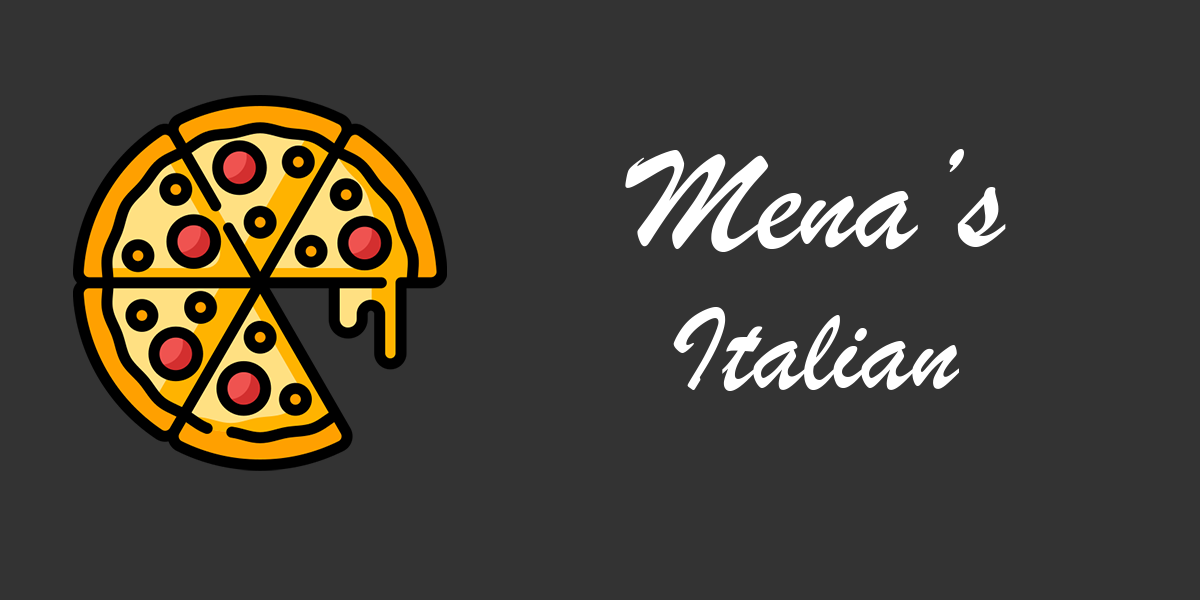
<style>
.page{position:relative;width:1200px;height:600px;background:#333333}
.page>*{position:absolute;margin:0}
.t1{font:150px "BrushScriptMT";color:#ffffff}
.t2{font:125px "BrushScriptMT";color:#ffffff}
</style>
<div class="page">
<p class="t1" style="left:625px;top:149px;width:381px;height:103px">Mena’s</p>
<p class="t2" style="left:673px;top:307px;width:286px;height:84px">Italian</p>
</div>
